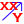
<style>
.page{position:relative;width:24px;height:24px;background:#ffffff}
.page>*{position:absolute;margin:0}
.t1{font:12px "CopperplateGothic-Bold";color:#ff0000}
.t2{font:14px "CopperplateGothic-Bold";color:#ff0000}
</style>
<div class="page">
<p class="t1" style="left:0px;top:2px;width:18px;height:8px">XX</p>
<p class="t2" style="left:12px;top:13px;width:11px;height:9px">Y</p>
</div>
